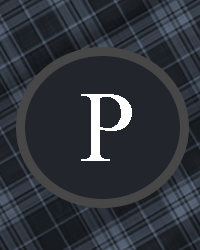
<style>
.page{position:relative;width:200px;height:250px;background:#22262c}
.page>*{position:absolute;margin:0}
.t1{font:100.2px "TimesNewRomanPSMT";letter-spacing:0.04em;color:#ffffff}
</style>
<div class="page">
<p class="t1" style="left:81px;top:94px;width:51px;height:67px">P</p>
</div>
